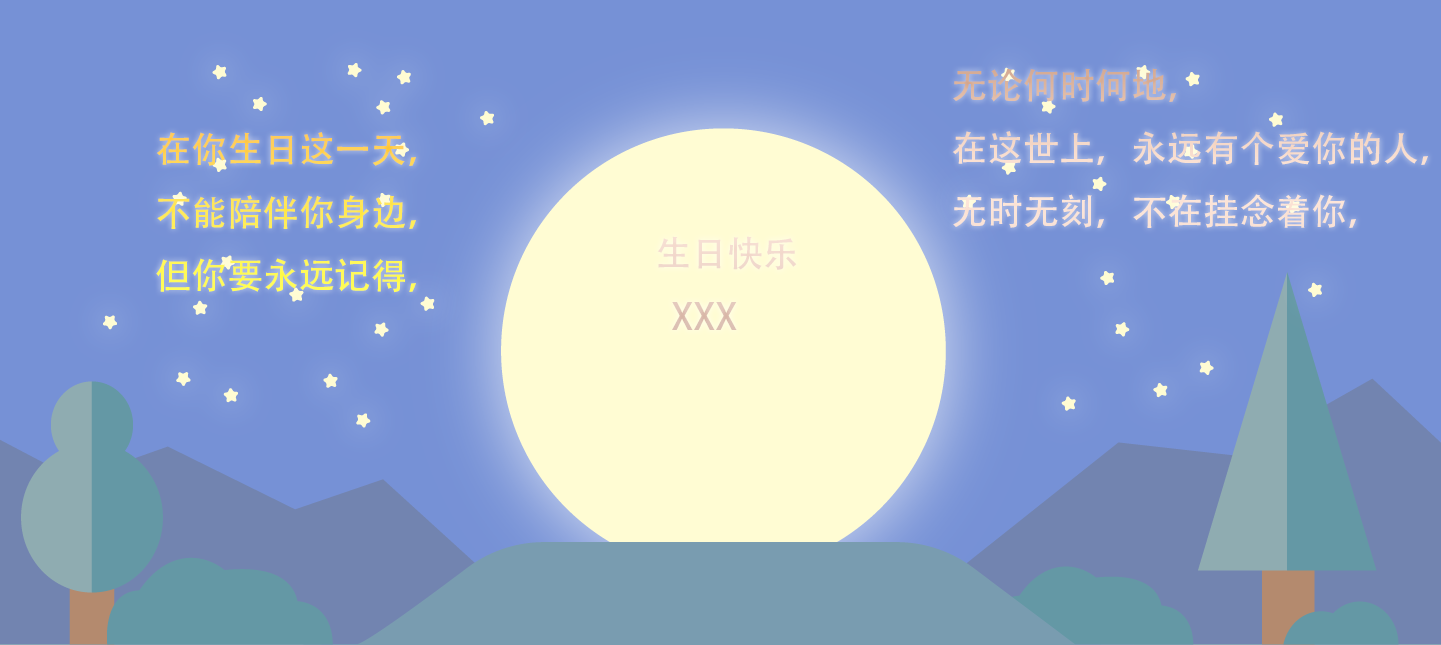
<style>
.page{position:relative;width:1441px;height:645px;background:#7691d6}
.page>*{position:absolute;margin:0}
.t1{font:36px "AdobeHeitiStd-Regular";color:#f8decf}
.t2{font:36px "AdobeHeitiStd-Regular";color:#ffea5a}
.t3{font:36px "AdobeHeitiStd-Regular";color:#f1d9cc}
</style>
<div class="page">
<p class="t1" style="left:952px;top:68px;width:476px;height:160px">无论何时何地，<br>在这世上，永远有个爱你的人，<br>无时无刻，不在挂念着你，</p>
<p class="t2" style="left:156px;top:132px;width:260px;height:161px">在你生日这一天，<br>不能陪伴你身边，<br>但你要永远记得，</p>
<p class="t3" style="left:657px;top:236px;width:140px;height:94px">生日快乐<br>  XXX</p>
</div>
